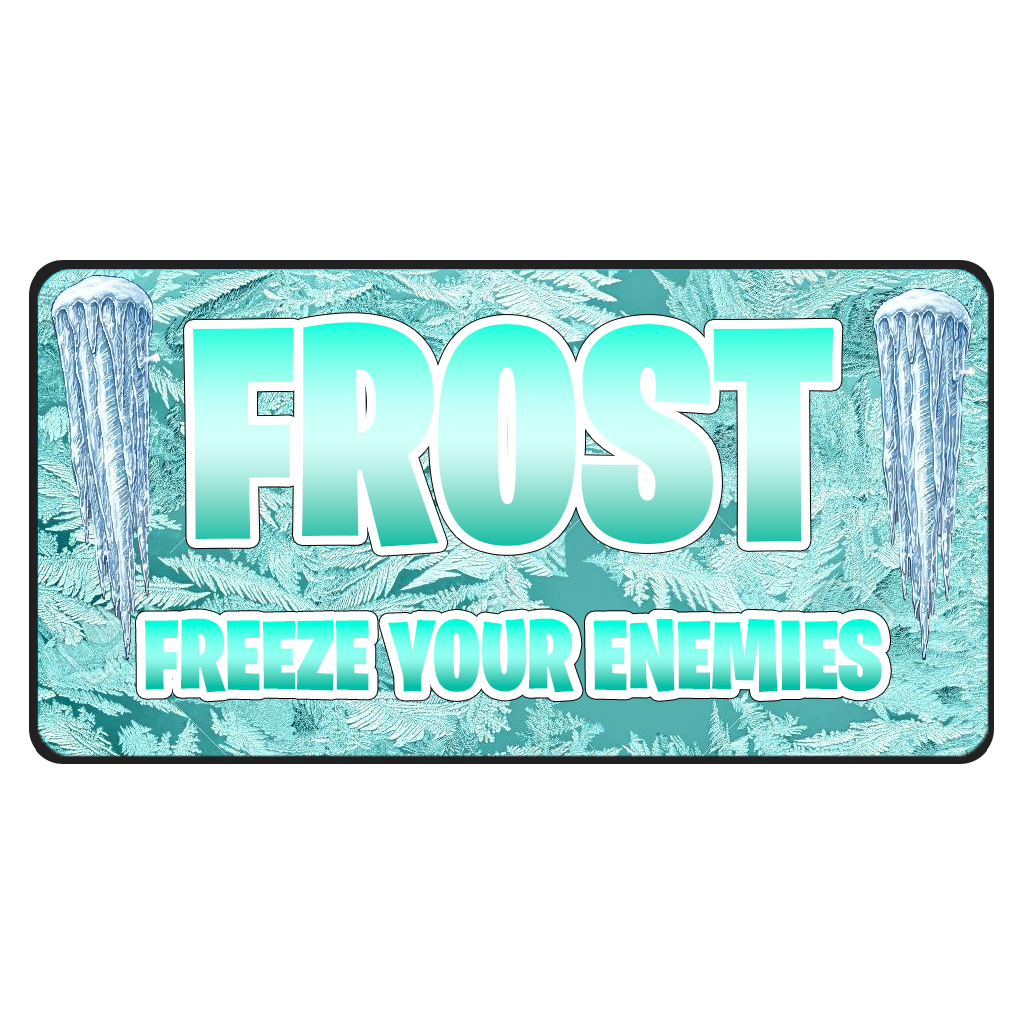
<style>
.page{position:relative;width:1024px;height:1024px;background:#ffffff}
.page>*{position:absolute;margin:0}
.t1{font:304.1px "BurbankBigCondensed-Black"}
.t2{font:100px "BurbankBigCondensed-Black"}
</style>
<div class="page">
<p class="t1" style="left:193px;top:322px;width:641px;height:225px">FROST</p>
<p class="t2" style="left:145px;top:618px;width:737px;height:75px">FREEZE YOUR ENEMIES</p>
</div>
